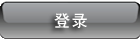
<style>
.page{position:relative;width:140px;height:40px}
.page>*{position:absolute;margin:0}
.t1{font:16px "CTCuHeiSJ";letter-spacing:0.1em;color:#fffffe}
</style>
<div class="page">
<p class="t1" style="left:54px;top:13px;width:33px;height:15px">登录</p>
</div>
